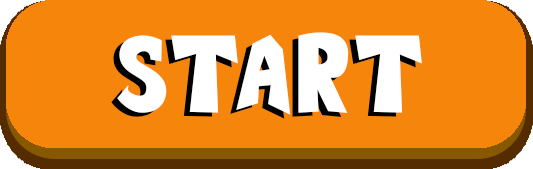
<style>
.page{position:relative;width:533px;height:169px;background:#f6850c}
.page>*{position:absolute;margin:0}
.t1{font:112.4px "TytoonMist";color:#ffffff}
</style>
<div class="page">
<p class="t1" style="left:111px;top:36px;width:305px;height:83px">START</p>
<p class="t1" style="left:117px;top:32px;width:305px;height:83px">START</p>
</div>
